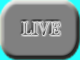
<style>
.page{position:relative;width:80px;height:60px;background:#808080}
.page>*{position:absolute;margin:0}
.t1{font:18px "MyungjoXB-HM"}
</style>
<div class="page">
<p class="t1" style="left:21px;top:21px;width:39px;height:14px">LIVE</p>
</div>
